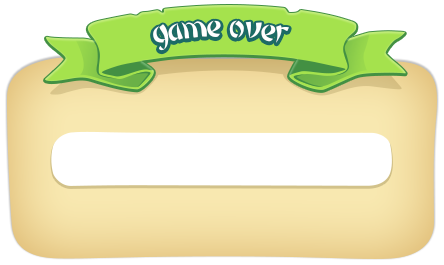
<style>
.page{position:relative;width:444px;height:265px;background:#ffffff}
.page>*{position:absolute;margin:0}
.t1{font:32.5px "FZZBHJW--GB1-0";letter-spacing:-0.02em;color:#ffffff}
</style>
<div class="page">
<p class="t1" style="left:153px;top:20px;width:136px;height:31px">game over</p>
</div>
